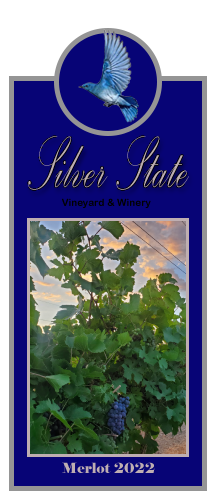
<style>
.page{position:relative;width:216px;height:504px;background:#070476}
.page>*{position:absolute;margin:0}
.t1{font:10px "ArialRoundedMTBold";color:#000000}
.t2{font:14px "Elephant-Regular";color:#beaeb1}
</style>
<div class="page">
<p class="t1" style="left:62px;top:198px;width:89px;height:10px">Vineyard &amp; Winery</p>
<p class="t2" style="left:62px;top:462px;width:93px;height:11px">Merlot 2022</p>
</div>
